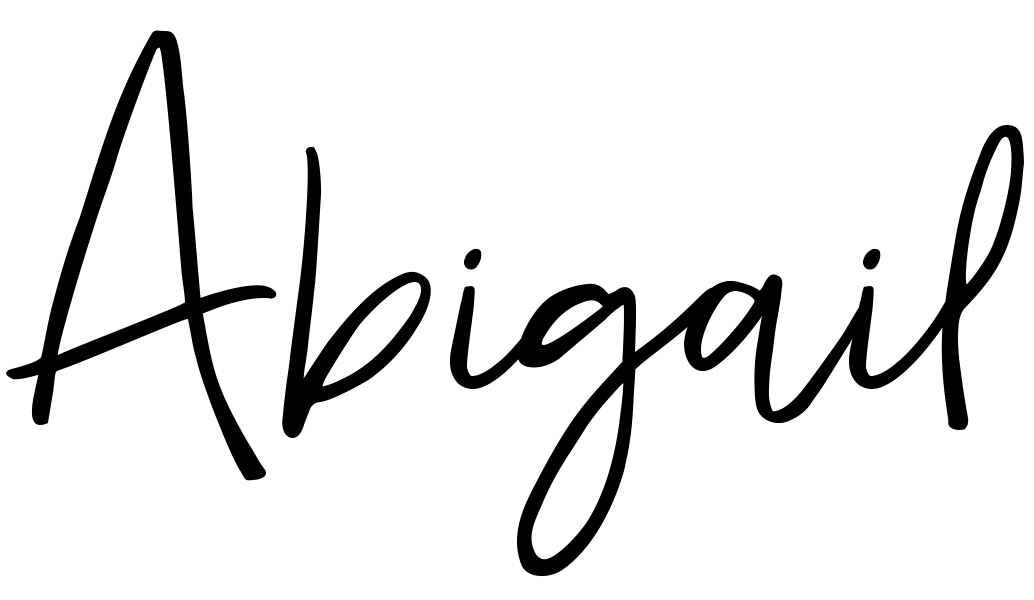
<style>
.page{position:relative;width:1034px;height:600px;background:#ffffff}
.page>*{position:absolute;margin:0}
.t1{font:648px "Foxglow-Regular";color:#000000}
</style>
<div class="page">
<p class="t1" style="left:6px;top:30px;width:1018px;height:547px">Abigail</p>
</div>
